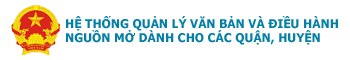
<style>
.page{position:relative;width:350px;height:60px;background:#ffffff}
.page>*{position:absolute;margin:0}
.t1{font:12px "Tahoma-Bold";color:#047fa5}
</style>
<div class="page">
<p class="t1" style="left:66px;top:16px;width:272px;height:29px">HỆ THỐNG QUẢN LÝ VĂN BẢN VÀ ĐIỀU HÀNH <br>NGUỒN MỞ DÀNH CHO CÁC QUẬN, HUYỆN</p>
</div>
